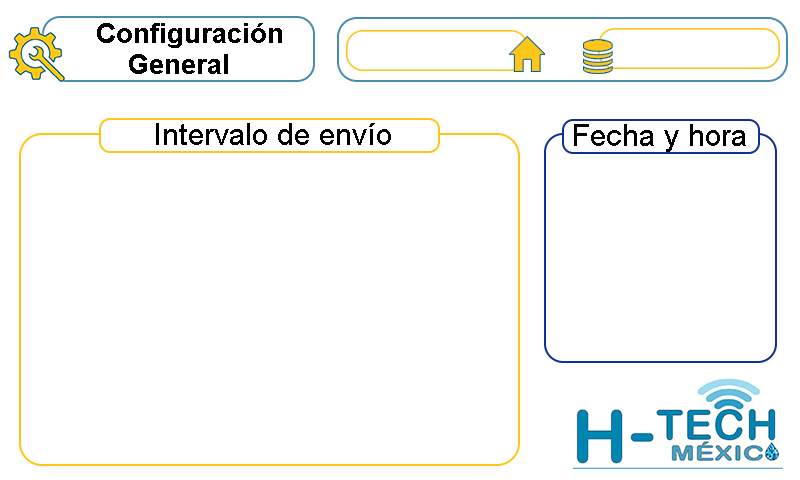
<style>
.page{position:relative;width:800px;height:480px;background:#ffffff}
.page>*{position:absolute;margin:0}
.t1{font:26.7px "Arial-BoldMT";color:#000000}
.t2{font:31.1px "ArialMT";color:#000000}
</style>
<div class="page">
<p class="t1" style="left:97px;top:23px;width:185px;height:51px">Configuración <br>    General</p>
<p class="t2" style="left:156px;top:123px;width:235px;height:22px">Intervalo de envío</p>
<p class="t2" style="left:574px;top:124px;width:172px;height:28px">Fecha y hora</p>
</div>
